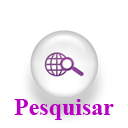
<style>
.page{position:relative;width:128px;height:128px;background:#ffffff}
.page>*{position:absolute;margin:0}
.t1{font:24px "TimesNewRomanPS-BoldMT";color:#b700c2}
</style>
<div class="page">
<p class="t1" style="left:14px;top:99px;width:100px;height:21px">Pesquisar</p>
</div>
